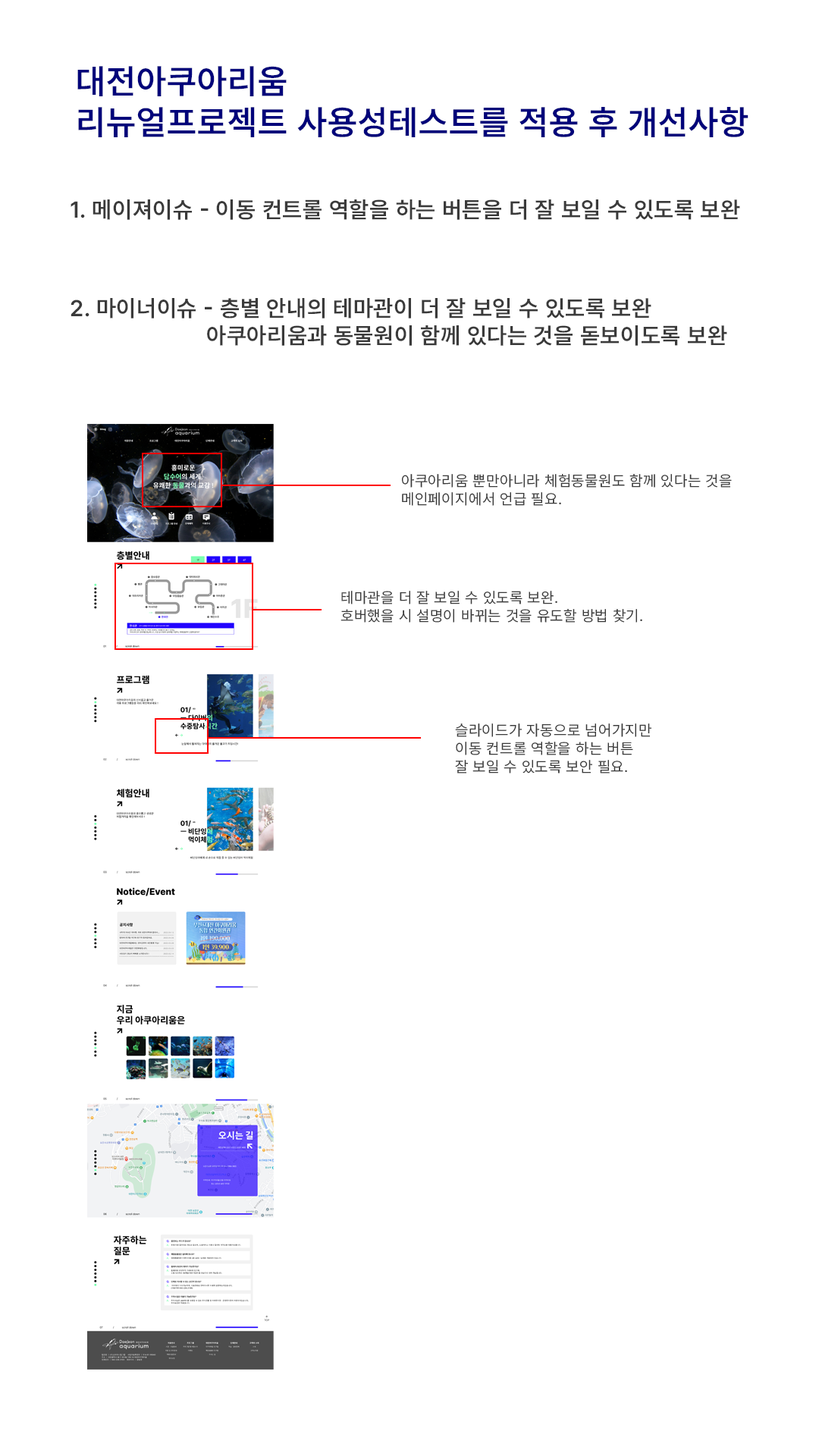
<style>
.page{position:relative;width:819px;height:1456px;background:#ffffff}
.page>*{position:absolute;margin:0}
.t1{font:34.1px "Pretendard-SemiBold";letter-spacing:0.025em;color:#00037a;text-transform:uppercase}
.t2{font:22.7px "Pretendard-SemiBold";letter-spacing:0.025em;color:#3a3a3a;text-transform:uppercase}
.t3{font:15.2px "Pretendard-Regular";letter-spacing:0.025em;color:#3a3a3a;text-transform:uppercase}
</style>
<div class="page">
<p class="t1" style="left:77px;top:66px;width:671px;height:71px">대전아쿠아리움<br>리뉴얼프로젝트 사용성테스트를 적용 후 개선사항</p>
<p class="t2" style="left:71px;top:199px;width:669px;height:21px">1. 메이져이슈 - 이동 컨트롤 역할을 하는 버튼을 더 잘 보일 수 있도록 보완</p>
<p class="t2" style="left:71px;top:298px;width:656px;height:48px">2. 마이너이슈 - 층별 안내의 테마관이 더 잘 보일 수 있도록 보완<br>     아쿠아리움과 동물원이 함께 있다는 것을 돋보이도록 보완</p>
<p class="t3" style="left:402px;top:474px;width:330px;height:32px">아쿠아리움 뿐만아니라 체험동물원도 함께 있다는 것을<br>메인페이지에서 언급 필요.</p>
<p class="t3" style="left:340px;top:591px;width:302px;height:32px">테마관을 더 잘 보일 수 있도록 보완.<br>호버했을 시 설명이 바뀌는 것을 유도할 방법 찾기.</p>
<p class="t3" style="left:455px;top:723px;width:196px;height:50px">슬라이드가 자동으로 넘어가지만<br>이동 컨트롤 역할을 하는 버튼<br>잘 보일 수 있도록 보안 필요.</p>
</div>
